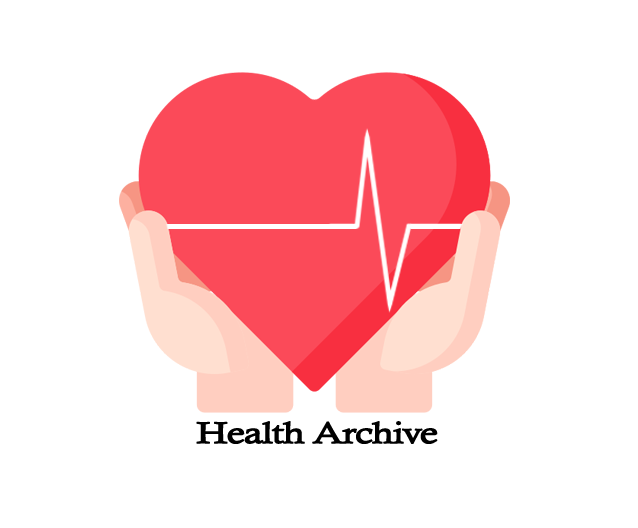
<style>
.page{position:relative;width:638px;height:528px;background:#ffffff}
.page>*{position:absolute;margin:0}
.t1{font:30px "CalistoMT";letter-spacing:-0.05em;color:#000000;font-weight:bold;scale:1.31 1}
</style>
<div class="page">
<p class="t1" style="left:196px;top:421px;width:242px;height:23px">Health Archive</p>
</div>
